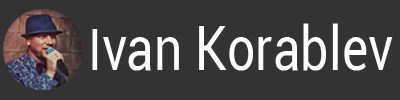
<style>
.page{position:relative;width:400px;height:100px;background:#333333}
.page>*{position:absolute;margin:0}
.t1{font:61.1px "Roboto-Regular";color:#ffffff;scale:0.82 1}
.t2{font:58.3px "Roboto-Regular";color:#ffffff;scale:0.82 1}
</style>
<div class="page">
<p class="t1" style="left:92px;top:23px;width:301px;height:48px"><span class="t2">I</span>van Korablev</p>
</div>
